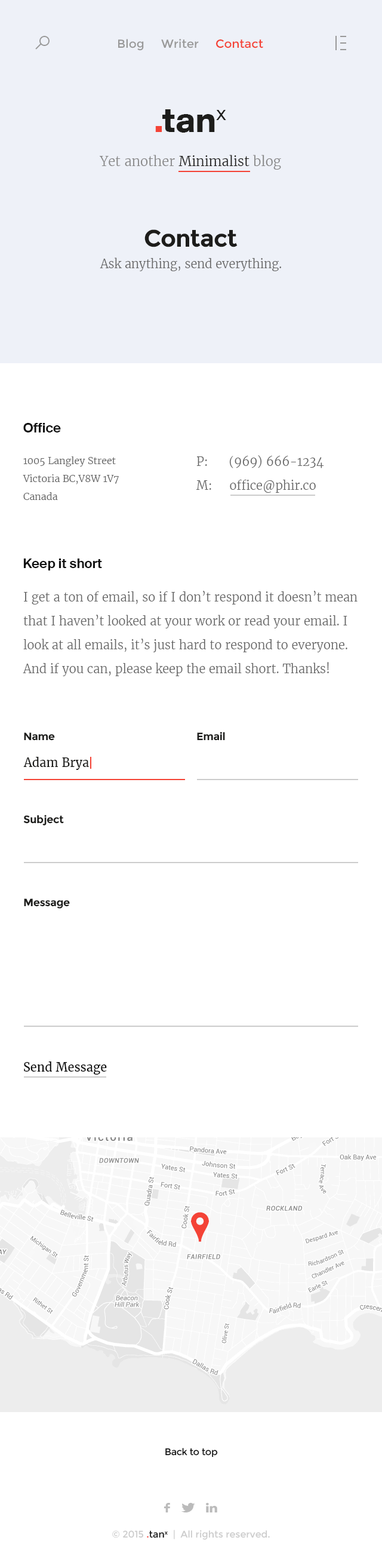
<style>
.page{position:relative;width:382px;height:1568px;background:#ffffff}
.page>*{position:absolute;margin:0}
.t1{font:11.7px "Montserrat-Regular";color:#999999}
.t2{font:11.7px "Montserrat-Regular";color:#f44336}
.t3{font:13.1px "MerriweatherLight";color:#888888}
.t4{font:13.1px "MerriweatherLight";color:#1d1d1b}
.t5{font:23.9px "Montserrat-Bold";letter-spacing:-0.025em;color:#1d1d1b}
.t6{font:11.9px "MerriweatherLight";color:#666666}
.t7{font:14.3px "SuisseBPIntl-Antique";color:#111111}
.t8{font:9.6px/17.9px "MerriweatherLight";color:#666666}
.t9{font:11.9px/23.9px "MerriweatherLight";color:#666666}
.t10{font:10.8px "Montserrat-Bold";letter-spacing:-0.025em;color:#1d1d1b}
.t11{font:11.9px "Merriweather-Regular";color:#1d1d1b}
.t12{font:11.9px "Merriweather-Regular";color:#111111}
.t13{font:9.6px "Montserrat-Regular";letter-spacing:-0.025em;color:#111111}
.t14{font:10.8px "Zocial-Regular";color:#bbbbbb}
.t15{font:9.6px "Montserrat-Regular";color:#cccccc}
.t16{font:9.6px "Montserrat-Regular";color:#f44336}
.t17{font:9.6px "Montserrat-Regular";color:#111111}
</style>
<div class="page">
<p class="t1" style="left:118px;top:39px;width:26px;height:12px">Blog</p>
<p class="t1" style="left:161px;top:39px;width:38px;height:9px">Writer</p>
<p class="t2" style="left:216px;top:39px;width:47px;height:9px">Contact</p>
<p class="t3" style="left:99px;top:155px;width:182px;height:15px">Yet another <span class="t4">Minimalist</span> blog</p>
<p class="t5" style="left:145px;top:229px;width:93px;height:18px">Contact</p>
<p class="t6" style="left:100px;top:257px;width:181px;height:14px">Ask anything, send everything.</p>
<p class="t7" style="left:23px;top:423px;width:38px;height:9px">Office</p>
<p class="t8" style="left:23px;top:456px;width:96px;height:44px">1005 Langley Street<br>Victoria BC,V8W 1V7<br>Canada</p>
<p class="t9" style="left:196px;top:455px;width:128px;height:38px">P:      (969) 666-1234<br>M:     office@phir.co</p>
<p class="t7" style="left:23px;top:559px;width:79px;height:11px">Keep it short</p>
<p class="t9" style="left:23px;top:591px;width:335px;height:85px">I get a ton of email, so if I don’t respond it doesn’t mean that I haven’t looked at your work or read your email. I look at all emails, it’s just hard to respond to every­one. And if you can, please keep the email short. Thanks!</p>
<p class="t10" style="left:24px;top:732px;width:31px;height:9px">Name</p>
<p class="t10" style="left:197px;top:732px;width:28px;height:9px">Email</p>
<p class="t11" style="left:23px;top:756px;width:66px;height:14px">Adam Brya</p>
<p class="t10" style="left:23px;top:815px;width:41px;height:11px">Subject</p>
<p class="t10" style="left:24px;top:898px;width:46px;height:11px">Message</p>
<p class="t12" style="left:24px;top:1061px;width:83px;height:14px">Send Message</p>
<p class="t13" style="left:165px;top:1448px;width:53px;height:9px">Back to top</p>
<p class="t14" style="left:164px;top:1503px;width:6px;height:9px">f</p>
<p class="t14" style="left:182px;top:1503px;width:13px;height:9px">T</p>
<p class="t14" style="left:206px;top:1503px;width:11px;height:9px">L</p>
<p class="t15" style="left:112px;top:1530px;width:158px;height:10px">© 2015 <span class="t16">.</span><span class="t17">tanx</span>  |  All rights reserved.</p>
</div>
